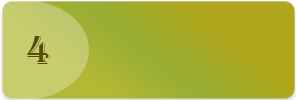
<style>
.page{position:relative;width:296px;height:100px}
.page>*{position:absolute;margin:0}
.t1{font:41.7px "Algerian";color:#545009}
</style>
<div class="page">
<p class="t1" style="left:27px;top:36px;width:23px;height:28px">4</p>
</div>
